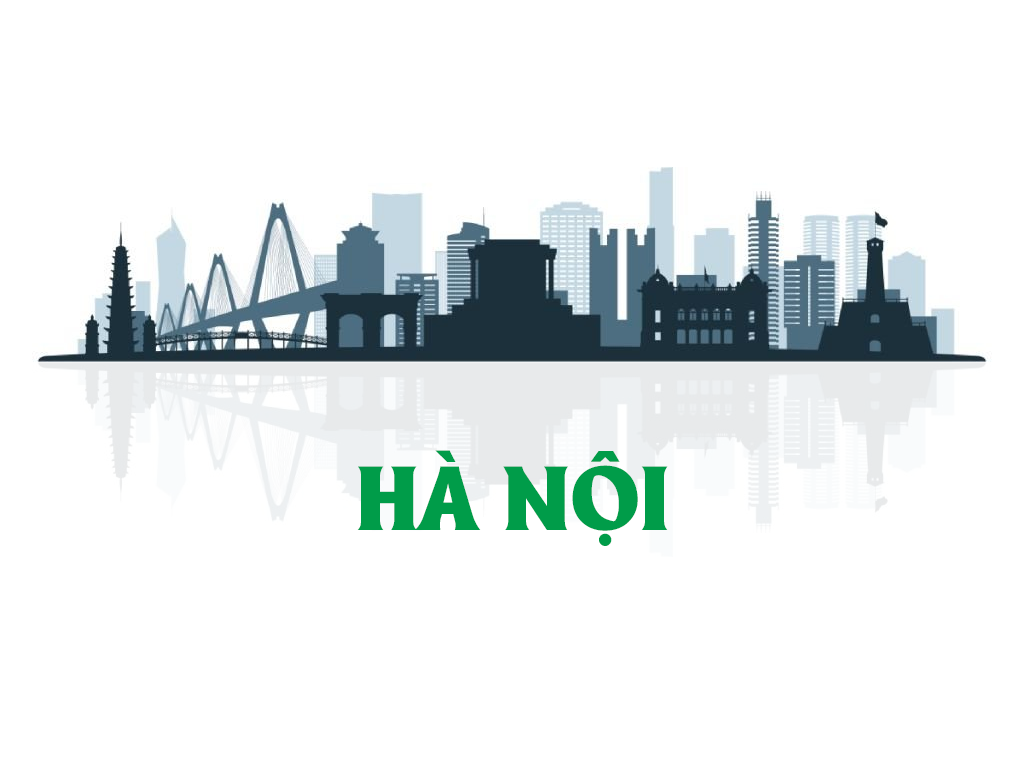
<style>
.page{position:relative;width:1024px;height:768px;background:#ffffff}
.page>*{position:absolute;margin:0}
.t1{font:88.3px "UTM-Alberta-Heavy";color:#009c49}
</style>
<div class="page">
<p class="t1" style="left:357px;top:450px;width:311px;height:96px">HÀ NỘI</p>
</div>
